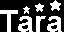
<style>
.page{position:relative;width:64px;height:32px;background:#000000}
.page>*{position:absolute;margin:0}
.t1{font:31px "Arial-BoldMT";color:#ffffff}
</style>
<div class="page">
<p class="t1" style="left:0px;top:10px;width:62px;height:22px">Tara</p>
</div>
